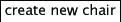
<style>
.page{position:relative;width:121px;height:22px;background:#ffffff}
.page>*{position:absolute;margin:0}
.t1{font:14px "LucidaGrande";color:#060808}
</style>
<div class="page">
<p class="t1" style="left:5px;top:4px;width:111px;height:12px">create new chair</p>
</div>
